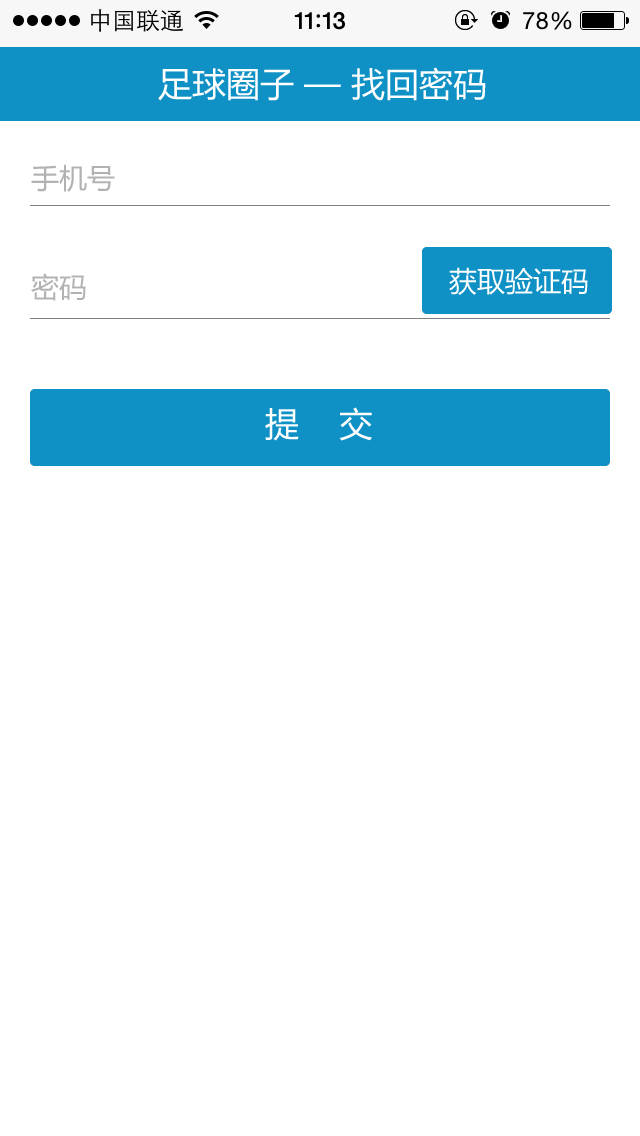
<style>
.page{position:relative;width:640px;height:1136px;background:#ffffff}
.page>*{position:absolute;margin:0}
.t1{font:34px "MicrosoftYaHei";color:#ffffff}
.t2{font:28px "MicrosoftYaHei";color:#b2b2b2}
.t3{font:28px "MicrosoftYaHei";color:#ffffff}
</style>
<div class="page">
<p class="t1" style="left:158px;top:67px;width:328px;height:34px">足球圈子 — 找回密码</p>
<p class="t2" style="left:31px;top:164px;width:84px;height:28px">手机号</p>
<p class="t3" style="left:449px;top:267px;width:139px;height:28px">获取验证码</p>
<p class="t2" style="left:31px;top:273px;width:55px;height:28px">密码</p>
<p class="t1" style="left:265px;top:407px;width:107px;height:34px">提    交</p>
</div>
